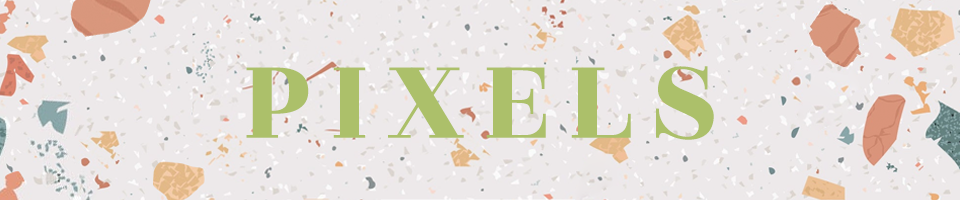
<style>
.page{position:relative;width:960px;height:200px;background:#ede9ea}
.page>*{position:absolute;margin:0}
.t1{font:125px "RozhaOne-Regular";letter-spacing:0.135em;color:#acc06a;text-transform:uppercase}
</style>
<div class="page">
<p class="t1" style="left:246px;top:66px;width:468px;height:74px">Pixels</p>
</div>
